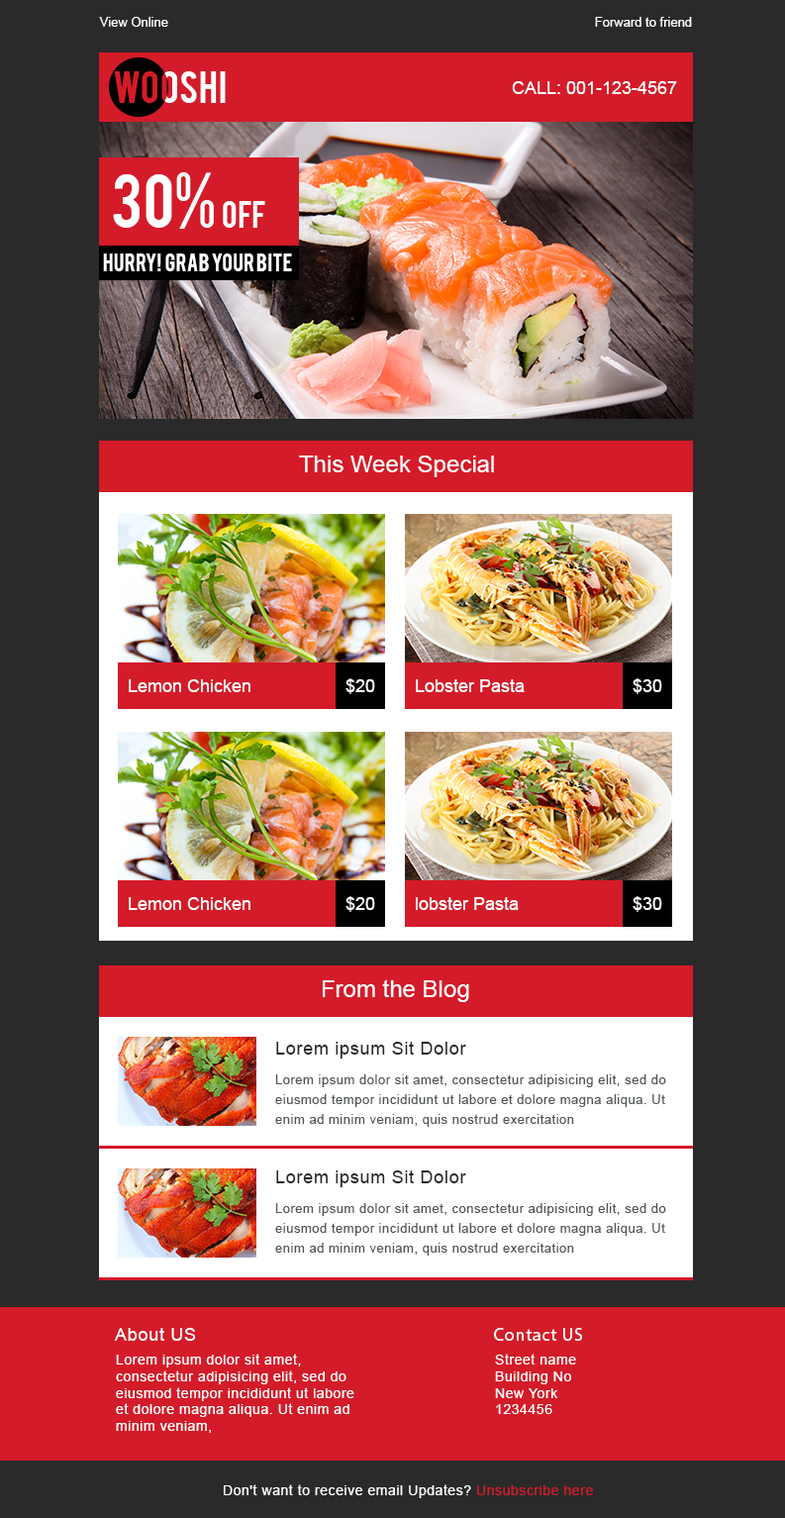
<style>
.page{position:relative;width:785px;height:1518px;background:#2a2a2a}
.page>*{position:absolute;margin:0}
.t1{font:12.9px "ArialMT";color:#ffffff}
.t2{font:17.8px "ArialMT";color:#ffffff}
.t3{font:59.4px "Bebas";color:#ffffff}
.t4{font:29.7px "Bebas";color:#ffffff}
.t5{font:19.8px "Bebas";color:#ffffff}
.t6{font:23.8px "ArialMT";color:#ffffff}
.t7{font:17.8px "ArialMT";letter-spacing:0.04em;color:#262626}
.t8{font:12.9px/19.8px "ArialMT";letter-spacing:0.04em;color:#4f5458}
.t9{font:17.8px "ArialMT";letter-spacing:0.04em;color:#ffffff}
.t10{font:17.8px "MyriadPro-Regular";letter-spacing:0.04em;color:#ffffff}
.t11{font:13.9px "ArialMT";letter-spacing:0.04em;color:#ffffff}
.t12{font:13.9px "ArialMT";letter-spacing:0.04em;color:#d41b29}
</style>
<div class="page">
<p class="t1" style="left:99px;top:17px;width:69px;height:10px">View Online</p>
<p class="t1" style="left:595px;top:17px;width:97px;height:10px">Forward to friend</p>
<p class="t2" style="left:512px;top:81px;width:165px;height:13px">CALL: 001-123-4567</p>
<p class="t3" style="left:113px;top:172px;width:152px;height:57px">30% <span class="t4">OFF</span></p>
<p class="t5" style="left:103px;top:254px;width:189px;height:17px">Hurry!  grab your bite</p>
<p class="t6" style="left:299px;top:456px;width:195px;height:21px">This Week Special</p>
<p class="t2" style="left:129px;top:679px;width:122px;height:13px">Lemon Chicken</p>
<p class="t2" style="left:346px;top:678px;width:29px;height:16px">$20</p>
<p class="t2" style="left:416px;top:679px;width:109px;height:13px">Lobster Pasta</p>
<p class="t2" style="left:633px;top:678px;width:30px;height:16px">$30</p>
<p class="t2" style="left:129px;top:897px;width:122px;height:13px">Lemon Chicken</p>
<p class="t2" style="left:346px;top:896px;width:29px;height:16px">$20</p>
<p class="t2" style="left:416px;top:897px;width:103px;height:13px">lobster Pasta</p>
<p class="t2" style="left:633px;top:896px;width:30px;height:16px">$30</p>
<p class="t6" style="left:323px;top:980px;width:146px;height:22px">From the Blog</p>
<p class="t7" style="left:276px;top:1042px;width:190px;height:17px">Lorem ipsum Sit Dolor</p>
<p class="t8" style="left:275px;top:1075px;width:392px;height:52px">Lorem ipsum dolor sit amet, consectetur adipisicing elit, sed do eiusmod tempor incididunt ut labore et dolore magna aliqua. Ut enim ad minim veniam, quis nostrud exercitation</p>
<p class="t7" style="left:276px;top:1171px;width:190px;height:16px">Lorem ipsum Sit Dolor</p>
<p class="t8" style="left:275px;top:1203px;width:392px;height:53px">Lorem ipsum dolor sit amet, consectetur adipisicing elit, sed do eiusmod tempor incididunt ut labore et dolore magna aliqua. Ut enim ad minim veniam, quis nostrud exercitation</p>
<p class="t9" style="left:114px;top:1328px;width:82px;height:13px">About US</p>
<p class="t10" style="left:494px;top:1328px;width:88px;height:13px">Contact US</p>
<p class="t11" style="left:116px;top:1354px;width:239px;height:79px">Lorem ipsum dolor sit amet, consectetur adipisicing elit, sed do eiusmod tempor incididunt ut labore et dolore magna aliqua. Ut enim ad minim veniam,</p>
<p class="t11" style="left:495px;top:1354px;width:81px;height:60px">Street name<br>Building No<br>New York<br>1234456</p>
<p class="t11" style="left:224px;top:1485px;width:369px;height:13px">Don't want to receive email Updates? <span class="t12">Unsubscribe here</span></p>
</div>
